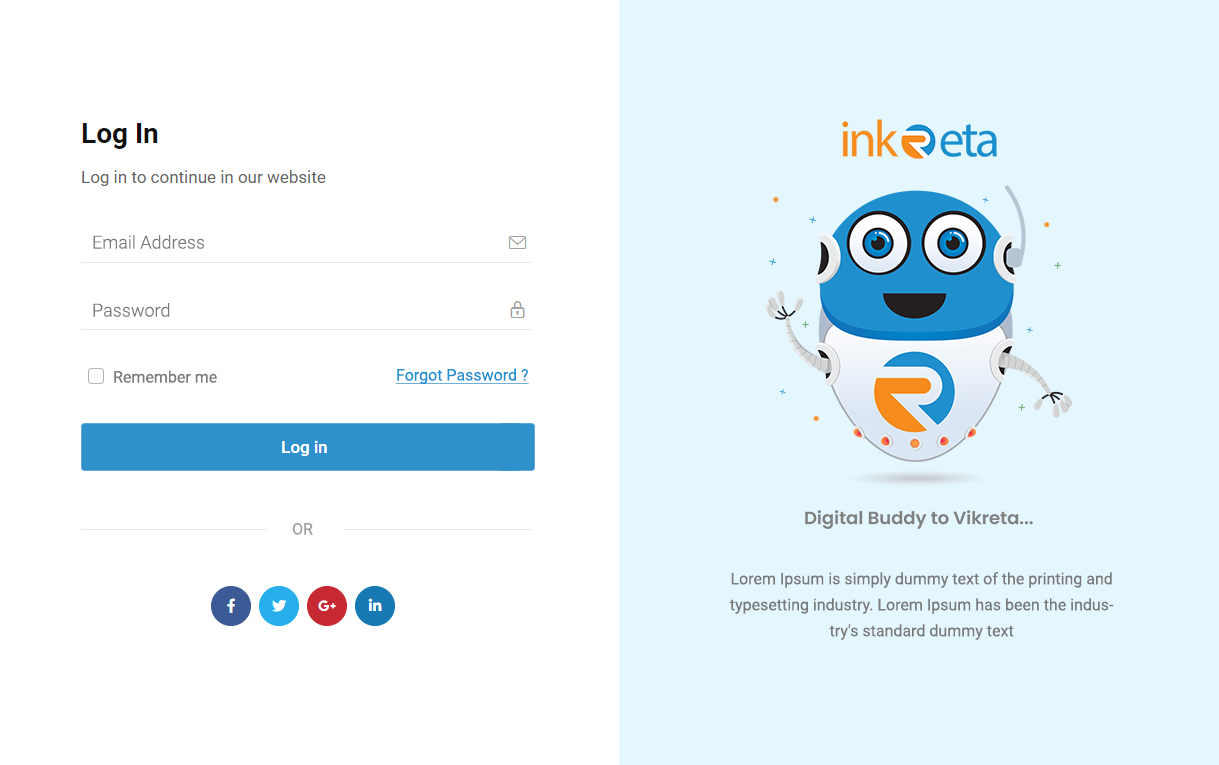
<style>
.page{position:relative;width:1219px;height:765px;background:#ffffff}
.page>*{position:absolute;margin:0}
.t1{font:18px "Roboto-Light";color:#7b7b7b}
.t2{font:16px "Roboto-Regular";color:#7b7b7b}
.t3{font:16px "Roboto-Regular";color:#208fcd;text-decoration:underline}
.t4{font:16px "Roboto-Regular";color:#9f9f9f}
.t5{font:16px/26px "Roboto-Regular";color:#7a7a7a}
</style>
<div class="page">
<p class="t1" style="left:93px;top:235px;width:112px;height:14px">Email Address</p>
<p class="t1" style="left:93px;top:303px;width:77px;height:14px">Password</p>
<p class="t2" style="left:114px;top:370px;width:103px;height:13px">Remember me</p>
<p class="t3" style="left:396px;top:368px;width:133px;height:16px">Forgot Password ?</p>
<p class="t4" style="left:292px;top:523px;width:21px;height:12px">OR</p>
<p class="t5" style="left:729px;top:572px;width:385px;height:68px;text-align:center">Lorem Ipsum is simply dummy text of the printing and typesetting industry. Lorem Ipsum has been the industry's standard dummy text</p>
</div>
